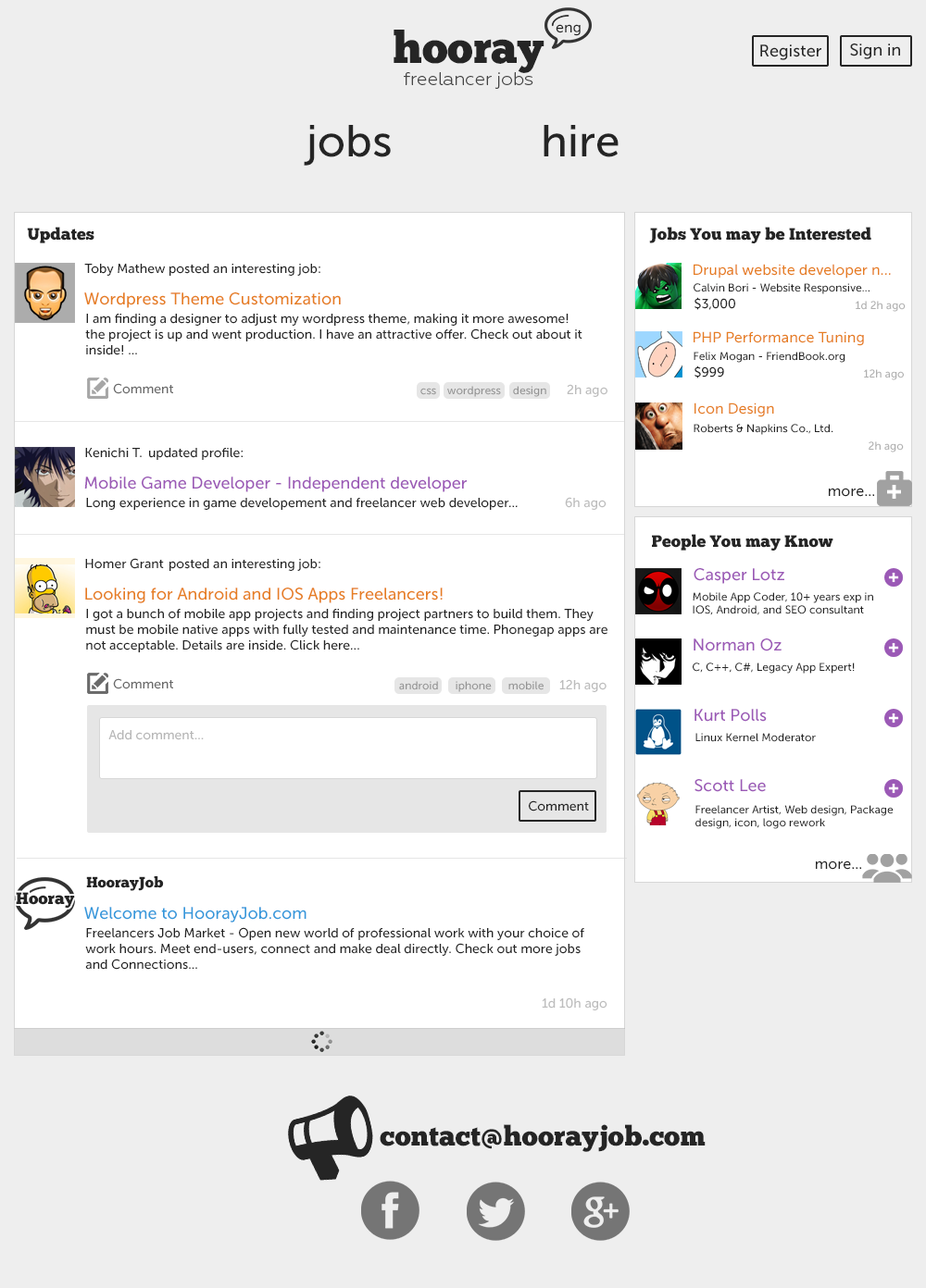
<style>
.page{position:relative;width:926px;height:1288px;background:#ffffff}
.page>*{position:absolute;margin:0}
.t1{font:44.4px "ChunkFive-Roman";color:#252525}
.t2{font:14.8px "MuseoSans-500";color:#252525}
.t3{font:16.7px "MuseoSans-500";color:#252525}
.t4{font:18.5px "Geometria-Light";color:#454545}
.t5{font:44.4px "MuseoSans-500";color:#252525}
.t6{font:16.7px "ChunkFive-Roman";color:#252525}
.t7{font:13px "MuseoSans-500";color:#252525}
.t8{font:14.8px "MuseoSans-500";color:#e67e22}
.t9{font:16.7px "MuseoSans-500";color:#e67e22}
.t10{font:11.1px "MuseoSans-500";color:#252525}
.t11{font:11.1px "MuseoSans-500";color:#afafaf}
.t12{font:13px "MuseoSans-500";color:#6a6a6a}
.t13{font:11.1px "MuseoSans-500";color:#949494}
.t14{font:13px "MuseoSans-500";color:#bdbdbd}
.t15{font:16.7px "MuseoSans-500";color:#9b59b6}
.t16{font:13px "MuseoSans-500";color:#b7b7b7}
.t17{font:14.8px "ChunkFive-Roman";color:#252525}
.t18{font:16.7px "MuseoSans-500";color:#3498db}
.t19{font:27.8px "ChunkFive-Roman";color:#252525}
</style>
<div class="page">
<p class="t1" style="left:393px;top:30px;width:151px;height:43px">hooray</p>
<p class="t2" style="left:555px;top:24px;width:25px;height:12px">eng</p>
<p class="t3" style="left:760px;top:44px;width:61px;height:16px">Register</p>
<p class="t3" style="left:850px;top:44px;width:50px;height:15px">Sign in</p>
<p class="t4" style="left:404px;top:72px;width:129px;height:17px">freelancer jobs</p>
<p class="t5" style="left:304px;top:125px;width:87px;height:41px">jobs</p>
<p class="t5" style="left:543px;top:125px;width:75px;height:32px">hire</p>
<p class="t6" style="left:27px;top:227px;width:67px;height:16px">Updates</p>
<p class="t6" style="left:649px;top:227px;width:222px;height:16px">Jobs You may be Interested</p>
<p class="t7" style="left:84px;top:264px;width:82px;height:12px">Toby Mathew</p>
<p class="t7" style="left:169px;top:264px;width:151px;height:12px">posted an interesting job:</p>
<p class="t8" style="left:693px;top:264px;width:197px;height:15px">Drupal website developer n...</p>
<p class="t9" style="left:84px;top:292px;width:257px;height:16px">Wordpress Theme Customization</p>
<p class="t10" style="left:693px;top:283px;width:176px;height:11px">Calvin Bori - Website Responsive...</p>
<p class="t7" style="left:694px;top:297px;width:41px;height:13px">$3,000</p>
<p class="t11" style="left:855px;top:301px;width:50px;height:11px">1d 2h ago</p>
<p class="t7" style="left:85px;top:314px;width:497px;height:41px">I am finding a designer to adjust my wordpress theme, making it more awesome!<br>the project is up and went production. I have an attractive offer. Check out about it <br>inside! ...</p>
<p class="t8" style="left:693px;top:331px;width:171px;height:15px">PHP Performance Tuning</p>
<p class="t10" style="left:693px;top:352px;width:152px;height:11px">Felix Mogan - FriendBook.org</p>
<p class="t7" style="left:694px;top:366px;width:30px;height:13px">$999</p>
<p class="t11" style="left:864px;top:369px;width:39px;height:11px">12h ago</p>
<p class="t12" style="left:113px;top:383px;width:60px;height:11px">Comment</p>
<p class="t13" style="left:420px;top:388px;width:16px;height:7px">css</p>
<p class="t13" style="left:447px;top:386px;width:54px;height:11px">wordpress</p>
<p class="t13" style="left:513px;top:386px;width:33px;height:11px">design</p>
<p class="t14" style="left:566px;top:384px;width:41px;height:13px">2h ago</p>
<p class="t8" style="left:694px;top:403px;width:80px;height:14px">Icon Design</p>
<p class="t10" style="left:693px;top:424px;width:140px;height:11px">Roberts &amp; Napkins Co., Ltd.</p>
<p class="t7" style="left:85px;top:448px;width:57px;height:10px">Kenichi T.</p>
<p class="t7" style="left:149px;top:448px;width:93px;height:12px">updated profile:</p>
<p class="t11" style="left:868px;top:441px;width:35px;height:12px">2h ago</p>
<p class="t15" style="left:84px;top:477px;width:382px;height:15px">Mobile Game Developer - Independent developer</p>
<p class="t7" style="left:86px;top:498px;width:431px;height:12px">Long experience in game developement and freelancer web developer...</p>
<p class="t14" style="left:565px;top:497px;width:41px;height:13px">6h ago</p>
<p class="t2" style="left:828px;top:488px;width:46px;height:9px">more...</p>
<p class="t6" style="left:652px;top:534px;width:181px;height:17px">People You may Know</p>
<p class="t7" style="left:85px;top:558px;width:79px;height:11px">Homer Grant</p>
<p class="t7" style="left:169px;top:559px;width:151px;height:12px">posted an interesting job:</p>
<p class="t15" style="left:693px;top:568px;width:91px;height:16px">Casper Lotz</p>
<p class="t9" style="left:85px;top:588px;width:357px;height:15px">Looking for Android and IOS Apps Freelancers!</p>
<p class="t10" style="left:692px;top:592px;width:181px;height:23px">Mobile App Coder, 10+ years exp in<br>IOS, Android, and SEO consultant</p>
<p class="t7" style="left:86px;top:609px;width:521px;height:44px">I got a bunch of mobile app projects and finding project partners to build them. They<br>must be mobile native apps with fully tested and maintenance time. Phonegap apps are<br>not acceptable. Details are inside. Click here...</p>
<p class="t15" style="left:693px;top:639px;width:88px;height:13px">Norman Oz</p>
<p class="t10" style="left:692px;top:663px;width:162px;height:11px">C, C++, C#, Legacy App Expert!</p>
<p class="t12" style="left:113px;top:678px;width:60px;height:12px">Comment</p>
<p class="t13" style="left:399px;top:681px;width:39px;height:9px">android</p>
<p class="t13" style="left:455px;top:681px;width:36px;height:11px">iphone</p>
<p class="t13" style="left:508px;top:681px;width:35px;height:9px">mobile</p>
<p class="t14" style="left:559px;top:679px;width:47px;height:13px">12h ago</p>
<p class="t15" style="left:694px;top:709px;width:72px;height:13px">Kurt Polls</p>
<p class="t16" style="left:108px;top:730px;width:96px;height:10px">Add comment...</p>
<p class="t10" style="left:695px;top:733px;width:120px;height:9px">Linux Kernel Moderator</p>
<p class="t15" style="left:694px;top:779px;width:71px;height:13px">Scott Lee</p>
<p class="t7" style="left:528px;top:801px;width:61px;height:11px">Comment</p>
<p class="t10" style="left:695px;top:805px;width:198px;height:24px">Freelancer Artist, Web design, Package<br>design, icon, logo rework</p>
<p class="t2" style="left:815px;top:861px;width:46px;height:9px">more...</p>
<p class="t17" style="left:86px;top:876px;width:78px;height:15px">HoorayJob</p>
<p class="t18" style="left:84px;top:907px;width:222px;height:16px">Welcome to HoorayJob.com</p>
<p class="t7" style="left:85px;top:927px;width:499px;height:43px">Freelancers Job Market - Open new world of professional work with your choice of<br>work hours. Meet end-users, connect and make deal directly. Check out more jobs<br>and Connections...</p>
<p class="t14" style="left:541px;top:998px;width:66px;height:13px">1d 10h ago</p>
<p class="t19" style="left:379px;top:1125px;width:326px;height:27px">contact@hoorayjob.com</p>
</div>
